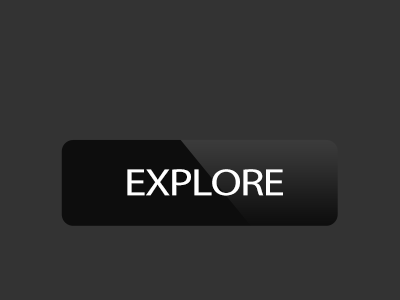
<style>
.page{position:relative;width:400px;height:300px;background:#333333}
.page>*{position:absolute;margin:0}
.t1{font:38px "MyriadPro-Regular";letter-spacing:-0.035em;color:#ffffff;scale:1.18 1}
</style>
<div class="page">
<p class="t1" style="left:127px;top:169px;width:156px;height:27px">EXPLORE</p>
</div>
